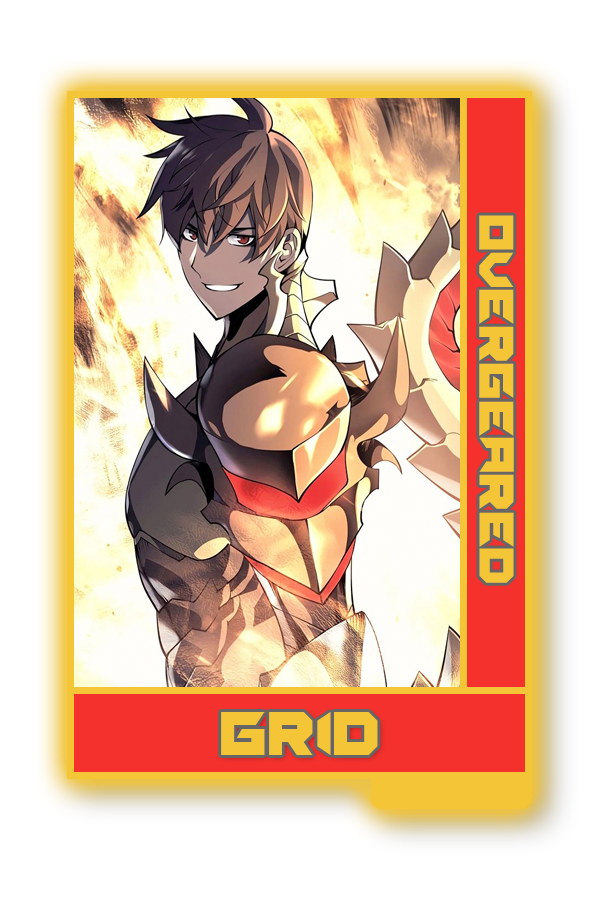
<style>
.page{position:relative;width:600px;height:900px;background:#ffffff}
.page>*{position:absolute;margin:0}
.t1{font:48.8px "Suggested-Regular";color:#f4c536}
.t2{font:62.5px "Suggested-Regular";color:#f4c536}
</style>
<div class="page">
<p class="t1" style="left:479px;top:215px;width:35px;height:368px;rotate:90deg">OVERGEARED</p>
<p class="t2" style="left:221px;top:712px;width:157px;height:43px">Grid</p>
</div>
